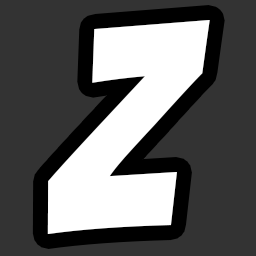
<style>
.page{position:relative;width:256px;height:256px;background:#333333}
.page>*{position:absolute;margin:0}
.t1{font:291.7px "BadaBoomBB";color:#ffffff}
</style>
<div class="page">
<p class="t1" style="left:47px;top:20px;width:163px;height:214px">z</p>
</div>
